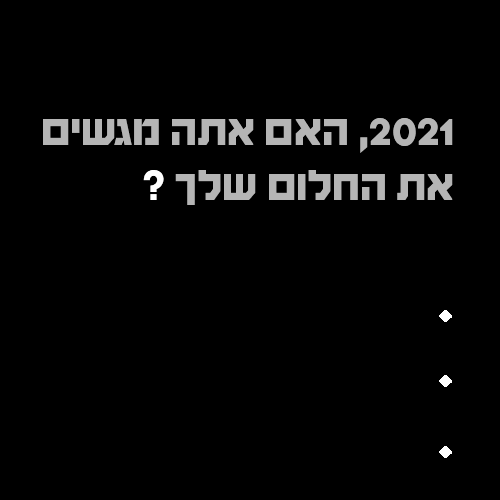
<style>
.page{position:relative;width:500px;height:500px;background:#000000}
.page>*{position:absolute;margin:0}
.t1{font:45.8px "HaimG-Regular";color:#b5b5b5}
.t2{font:45.8px "HaimG-Regular";color:#ffffff}
</style>
<div class="page">
<p class="t1" style="left:43px;top:118px;width:410px;height:87px">2021, האם אתה מגשים את החלום שלך <span class="t2">?</span></p>
</div>
